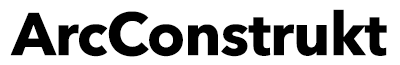
<style>
.page{position:relative;width:400px;height:65px;background:#ffffff}
.page>*{position:absolute;margin:0}
.t1{font:59.8px "AvenirNext-Bold";letter-spacing:-0.04em;color:#000000;font-weight:bold}
</style>
<div class="page">
<p class="t1" style="left:10px;top:9px;width:377px;height:48px">ArcConstrukt</p>
</div>
